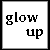
<style>
.page{position:relative;width:50px;height:50px;background:#ffffff}
.page>*{position:absolute;margin:0}
.t1{font:14px/14px "Charter-Bold";color:#000000;scale:0.97 1}
</style>
<div class="page">
<p class="t1" style="left:6px;top:12px;width:37px;height:27px">glow<br>     up</p>
</div>
